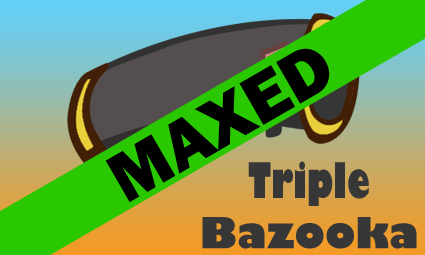
<style>
.page{position:relative;width:425px;height:255px}
.page>*{position:absolute;margin:0}
.t1{font:72px "FranklinGothic-Heavy";color:#000000}
.t2{font:42px "GillSans-UltraBold";color:#373737}
.t3{font:48px "GillSans-UltraBoldCondensed";color:#373737}
</style>
<div class="page">
<p class="t1" style="left:105px;top:48px;width:225px;height:154px;rotate:-30deg">MAXED</p>
<p class="t2" style="left:202px;top:161px;width:215px;height:88px;text-align:center"><span class="t3">Triple<br></span>Bazooka</p>
</div>
